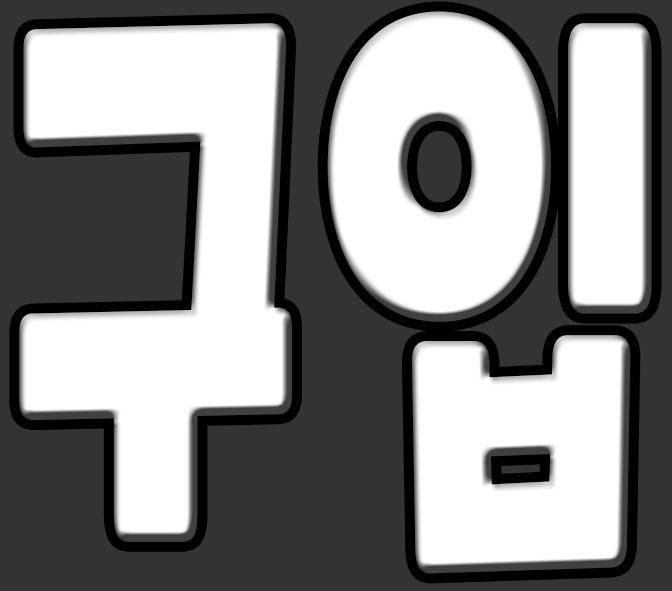
<style>
.page{position:relative;width:672px;height:591px;background:#ffffff}
.page>*{position:absolute;margin:0}
.t1{font:585.2px "CookieRunOTF-Black";color:#ffffff;scale:0.65 1}
</style>
<div class="page">
<p class="t1" style="left:19px;top:11px;width:633px;height:563px">구입</p>
</div>
